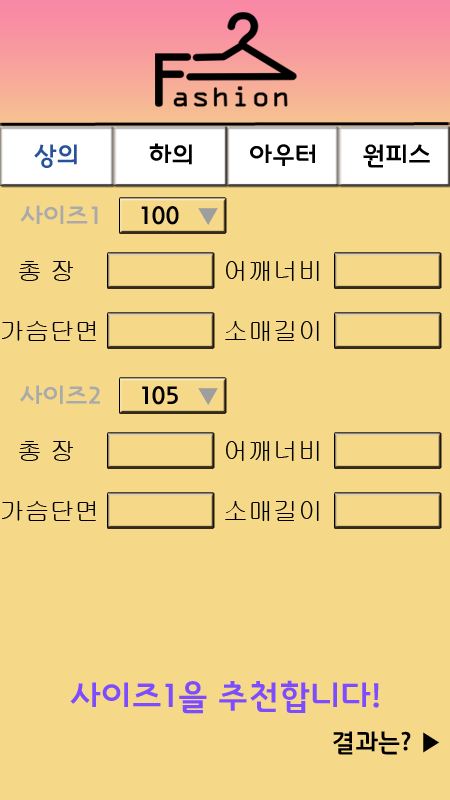
<style>
.page{position:relative;width:450px;height:800px;background:#f5d988}
.page>*{position:absolute;margin:0}
.t1{font:25px "InterGTB";color:#28539a}
.t2{font:25px "InterGTB";color:#000000}
.t3{font:25px "InterGTB";color:#aaaaaa}
.t4{font:25px "Gulim";color:#000000}
.t5{font:33.3px "InterGTB";color:#7c4dff}
</style>
<div class="page">
<p class="t1" style="left:34px;top:144px;width:43px;height:24px">상의</p>
<p class="t2" style="left:149px;top:143px;width:43px;height:22px">하의</p>
<p class="t2" style="left:250px;top:144px;width:65px;height:22px">아우터</p>
<p class="t2" style="left:363px;top:144px;width:67px;height:24px">원피스</p>
<p class="t3" style="left:20px;top:205px;width:78px;height:19px">사이즈1</p>
<p class="t2" style="left:141px;top:206px;width:38px;height:19px">100</p>
<p class="t4" style="left:19px;top:261px;width:54px;height:20px">총 장</p>
<p class="t4" style="left:226px;top:261px;width:93px;height:20px">어깨너비</p>
<p class="t4" style="left:2px;top:321px;width:94px;height:20px">가슴단면</p>
<p class="t4" style="left:225px;top:321px;width:94px;height:20px">소매길이</p>
<p class="t3" style="left:20px;top:385px;width:80px;height:19px">사이즈2</p>
<p class="t2" style="left:142px;top:386px;width:36px;height:19px">105</p>
<p class="t4" style="left:19px;top:441px;width:54px;height:20px">총 장</p>
<p class="t4" style="left:226px;top:441px;width:93px;height:20px">어깨너비</p>
<p class="t4" style="left:2px;top:501px;width:94px;height:20px">가슴단면</p>
<p class="t4" style="left:225px;top:501px;width:94px;height:20px">소매길이</p>
<p class="t5" style="left:70px;top:680px;width:309px;height:34px">사이즈1을 추천합니다!</p>
<p class="t2" style="left:333px;top:731px;width:107px;height:24px">결과는? ▶</p>
</div>
